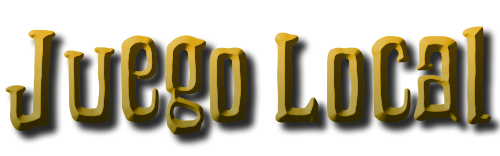
<style>
.page{position:relative;width:500px;height:156px;background:#ffffff}
.page>*{position:absolute;margin:0}
.t1{font:149.1px "Grooving";scale:1.07 1}
</style>
<div class="page">
<p class="t1" style="left:5px;top:26px;width:486px;height:109px">Juego Local</p>
</div>
